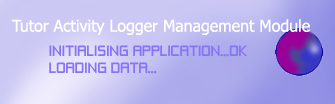
<style>
.page{position:relative;width:335px;height:104px}
.page>*{position:absolute;margin:0}
.t1{font:16px "Tahoma";color:#ffffff}
.t2{font:14px "ZeroThrees";color:#8673f5}
</style>
<div class="page">
<p class="t1" style="left:12px;top:19px;width:298px;height:16px">Tutor Activity Logger Management Module</p>
<p class="t2" style="left:49px;top:45px;width:198px;height:29px">INITIALISING APPLICATION...OK<br>LOADING DATA...</p>
</div>
